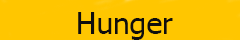
<style>
.page{position:relative;width:240px;height:40px;background:#ffc600}
.page>*{position:absolute;margin:0}
.t1{font:30px "Tahoma";color:#0f0e0e}
</style>
<div class="page">
<p class="t1" style="left:78px;top:12px;width:95px;height:28px">Hunger</p>
</div>
